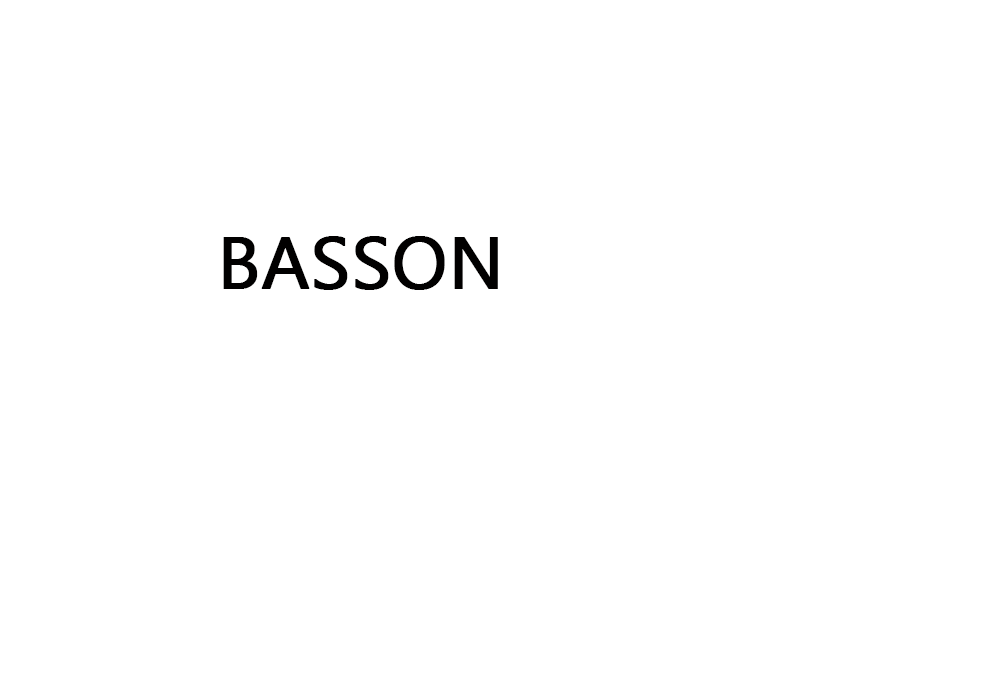
<style>
.page{position:relative;width:1000px;height:683px;background:#ffffff}
.page>*{position:absolute;margin:0}
.t1{font:73px "LeelawadeeUI";color:#010000;font-weight:bold}
</style>
<div class="page">
<p class="t1" style="left:223px;top:236px;width:275px;height:54px">BASSON</p>
</div>
